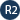
<style>
.page{position:relative;width:20px;height:20px;background:#193959}
.page>*{position:absolute;margin:0}
.t1{font:12px "MyriadPro-Regular";color:#ffffff}
</style>
<div class="page">
<p class="t1" style="left:5px;top:5px;width:13px;height:9px">R2</p>
</div>
